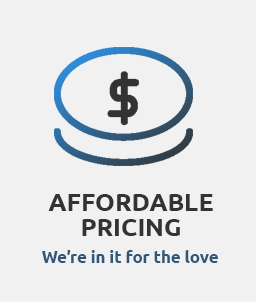
<style>
.page{position:relative;width:256px;height:302px;background:#f1f1f1}
.page>*{position:absolute;margin:0}
.t1{font:25px/25px "Ubuntu-Bold";color:#333333}
.t2{font:16.7px "Ubuntu-Bold";color:#2e587a}
</style>
<div class="page">
<p class="t1" style="left:48px;top:194px;width:165px;height:42px;text-align:center">AFFORDABLE<br>PRICING</p>
<p class="t2" style="left:42px;top:250px;width:176px;height:13px">We’re in it for the love</p>
</div>
